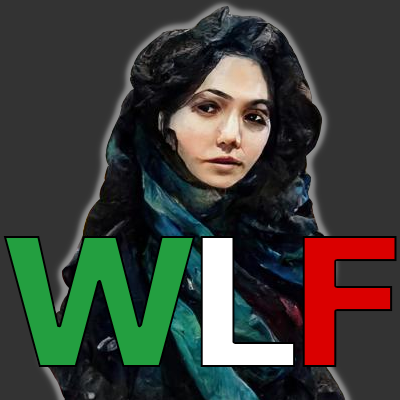
<style>
.page{position:relative;width:400px;height:400px;background:#333333}
.page>*{position:absolute;margin:0}
.t1{font:180px "Verdana-Bold";letter-spacing:-0.1em;color:#239f40}
.t2{font:180px "Verdana-Bold";letter-spacing:-0.1em;color:#ffffff}
.t3{font:180px "Verdana-Bold";letter-spacing:-0.1em;color:#da0000}
</style>
<div class="page">
<p class="t1" style="left:3px;top:236px;width:193px;height:131px">W</p>
<p class="t2" style="left:200px;top:236px;width:96px;height:131px">L</p>
<p class="t3" style="left:302px;top:236px;width:95px;height:131px">F</p>
</div>
